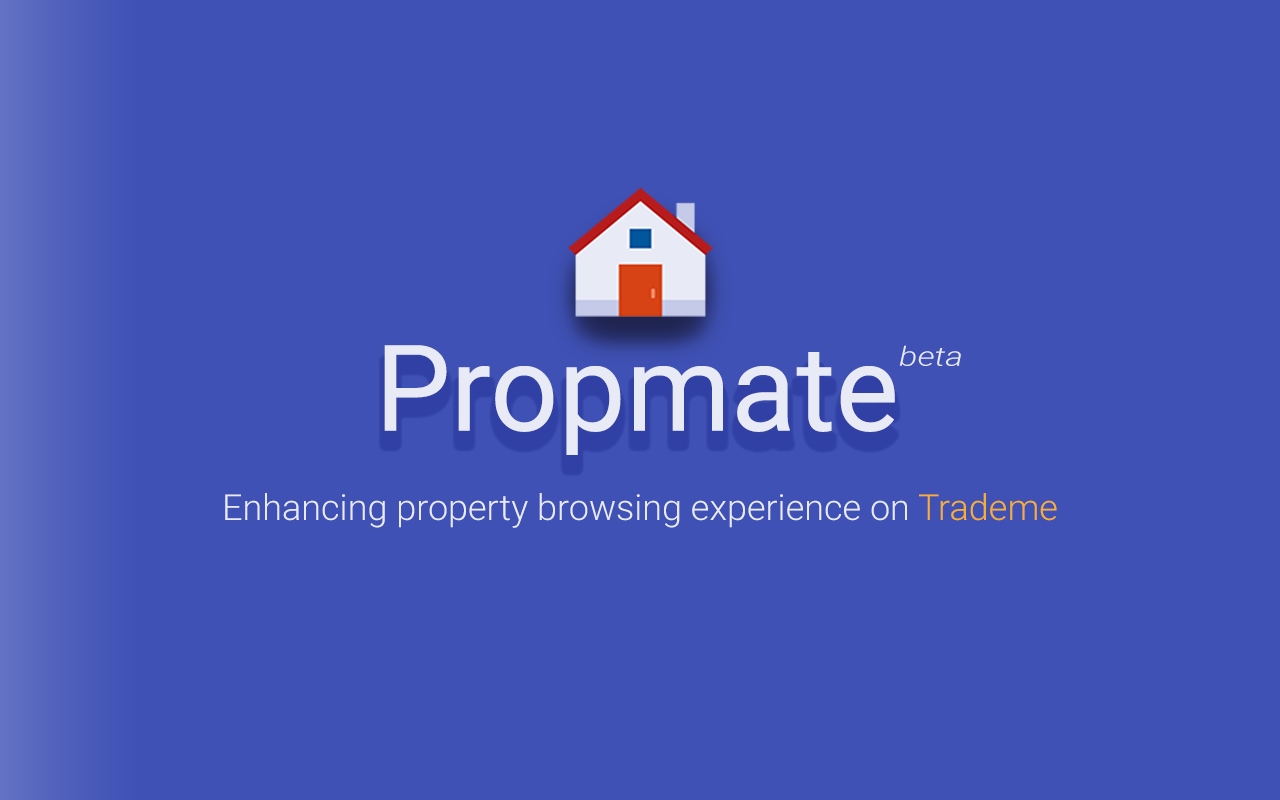
<style>
.page{position:relative;width:1280px;height:800px;background:#3f51b5}
.page>*{position:absolute;margin:0}
.t1{font:119.8px "Roboto-Regular";color:#e8eaf6}
.t2{font:26.6px "Roboto-LightItalic";color:#e8eaf6;scale:1.27 1}
.t3{font:36px "Roboto-Light";color:#e8eaf6}
.t4{font:36px "Roboto-Light";color:#f9af2c}
</style>
<div class="page">
<p class="t1" style="left:384px;top:345px;width:511px;height:110px">Propmate</p>
<p class="t2" style="left:899px;top:345px;width:62px;height:21px">beta</p>
<p class="t3" style="left:225px;top:493px;width:832px;height:35px">Enhancing property browsing experience on <span class="t4">Trademe</span></p>
</div>
